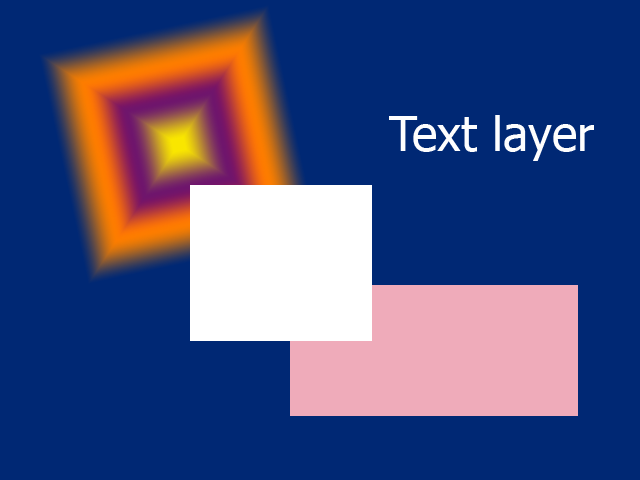
<style>
.page{position:relative;width:640px;height:480px;background:#002874}
.page>*{position:absolute;margin:0}
.t1{font:48px "Tahoma";color:#fefefe}
</style>
<div class="page">
<p class="t1" style="left:389px;top:115px;width:205px;height:46px">Text layer</p>
</div>
